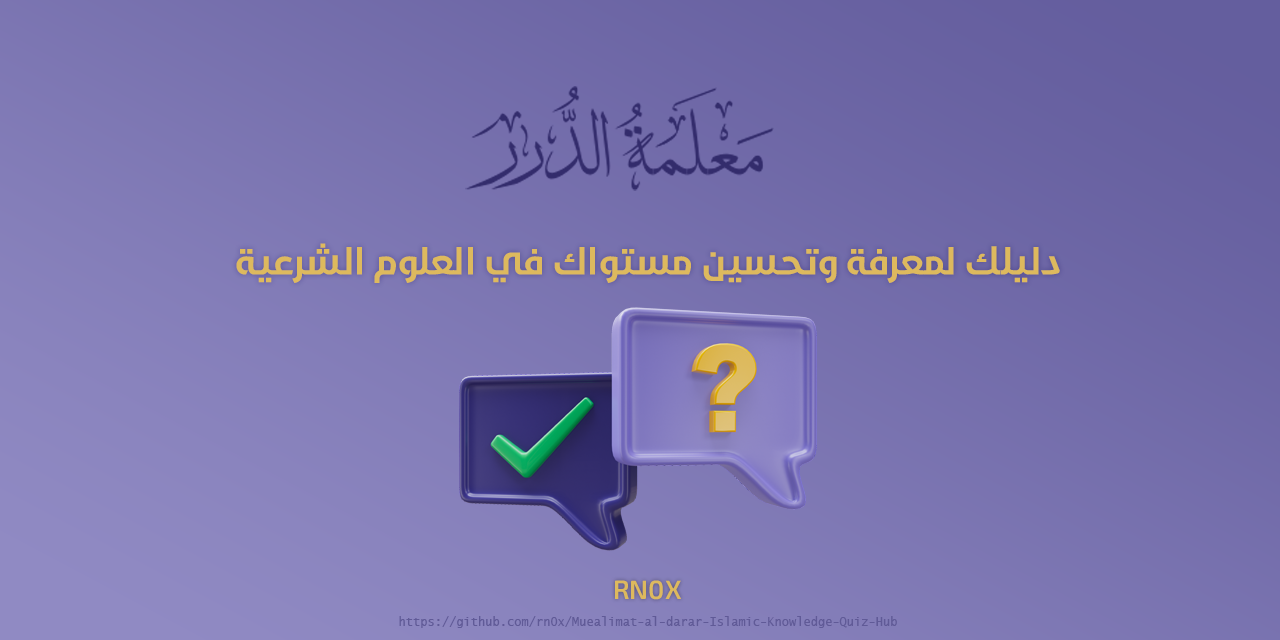
<style>
.page{position:relative;width:1280px;height:640px}
.page>*{position:absolute;margin:0}
.t1{font:36px "Noor-Bold";color:#ddb95e}
.t2{font:36px "AraHamahKilania-Regular";color:#ddb95e}
.t3{font:12px "LucidaSans-Typewriter";color:#605a97}
</style>
<div class="page">
<p class="t1" style="left:236px;top:243px;width:824px;height:40px">دليلك لمعرفة وتحسين مستواك في العلوم الشرعية</p>
<p class="t2" style="left:615px;top:580px;width:66px;height:20px">RN0X</p>
<p class="t3" style="left:399px;top:616px;width:498px;height:12px">https://github.com/rn0x/Muealimat-al-darar-Islamic-Knowledge-Quiz-Hub</p>
</div>
